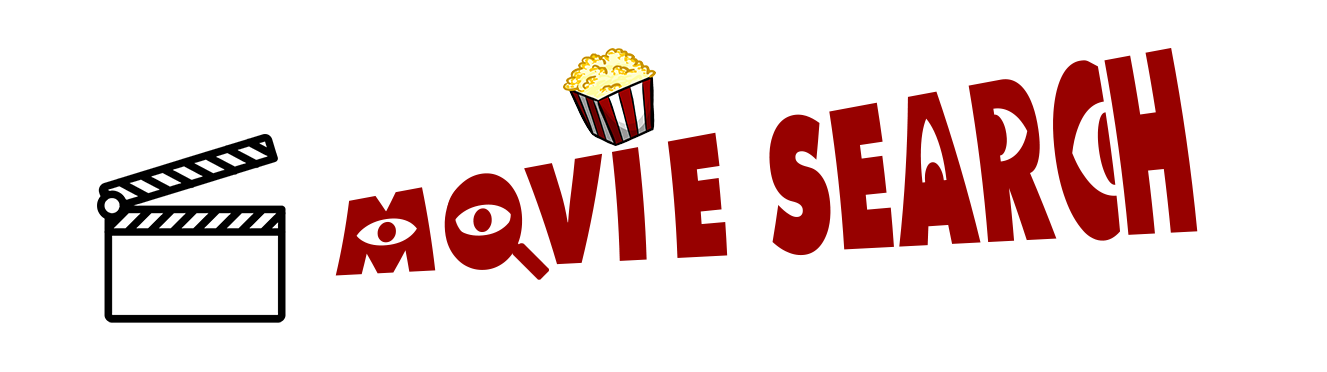
<style>
.page{position:relative;width:1327px;height:372px;background:#ffffff}
.page>*{position:absolute;margin:0}
.t1{font:150px "Monster-AG-Regular";color:#970100}
</style>
<div class="page">
<p class="t1" style="left:335px;top:48px;width:863px;height:228px">MOVIE SEARCH</p>
</div>
